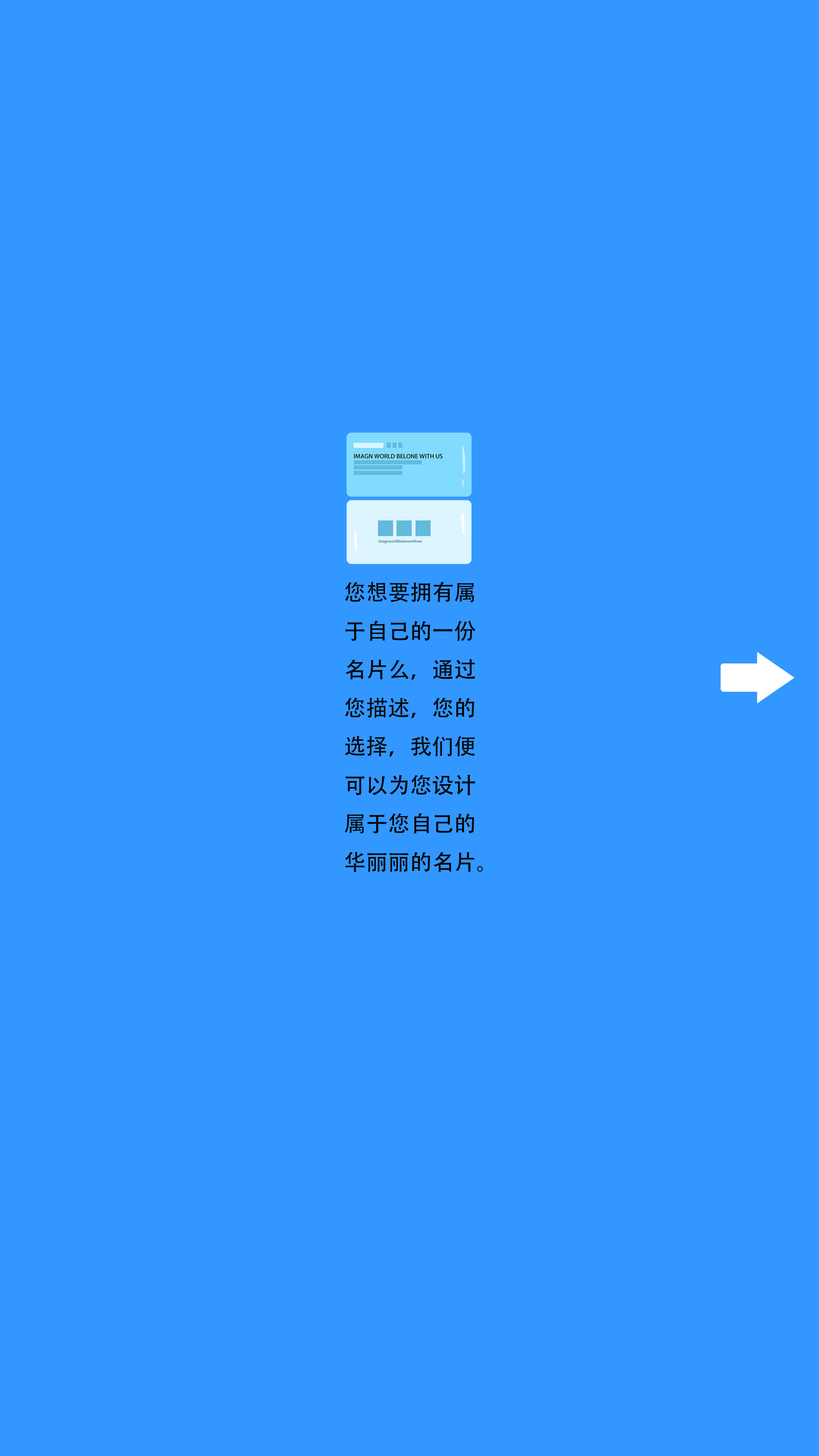
<style>
.page{position:relative;width:819px;height:1456px;background:#3297ff}
.page>*{position:absolute;margin:0}
.t1{font:22px "AdobeHeitiStd-Regular";color:#050505}
</style>
<div class="page">
<p class="t1" style="left:345px;top:582px;width:138px;height:290px">您想要拥有属<br>于自己的一份<br>名片么，通过<br>您描述，您的<br>选择，我们便<br>可以为您设计<br>属于您自己的<br>华丽丽的名片。</p>
</div>
